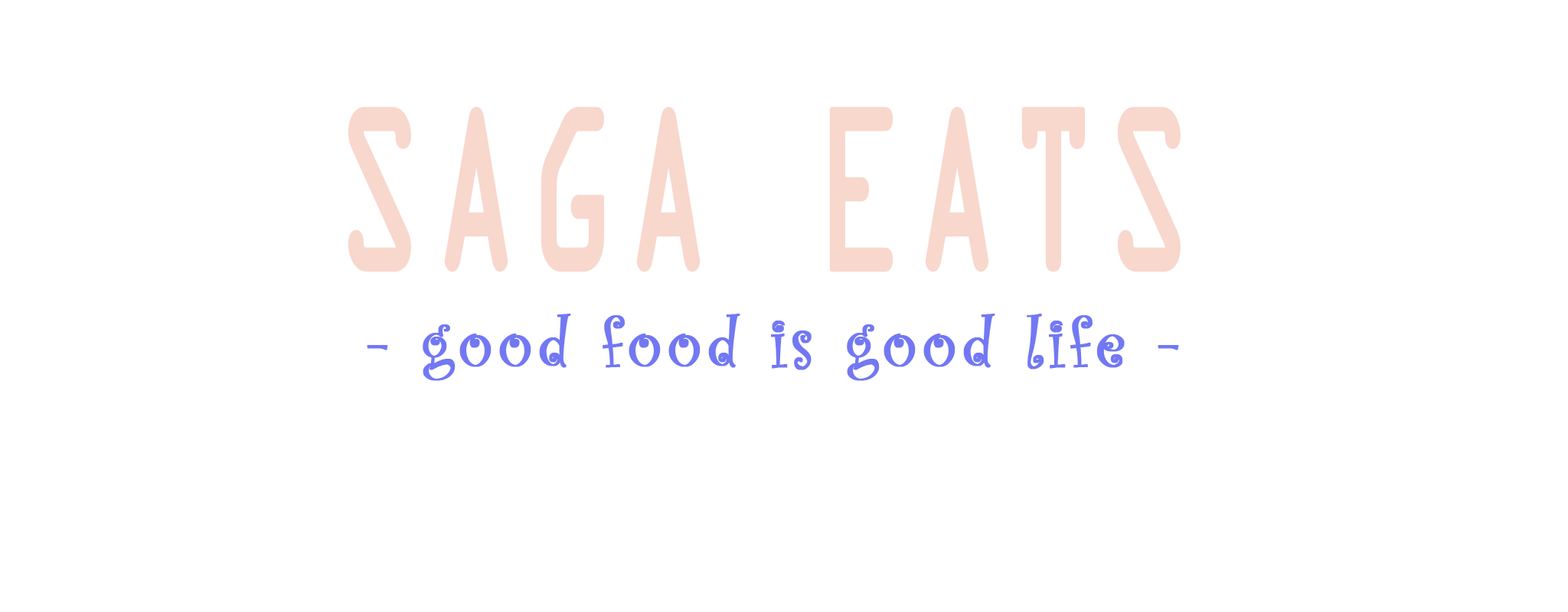
<style>
.page{position:relative;width:1568px;height:612px;background:#ffffff}
.page>*{position:absolute;margin:0}
.t1{font:207.9px "OCRAStd";letter-spacing:0.049em;color:#f8d7cd;font-weight:bold;scale:0.58 1}
.t2{font:71.5px "CurlzMT";letter-spacing:0.049em;color:#7278f2;font-weight:bold}
</style>
<div class="page">
<p class="t1" style="left:348px;top:106px;width:833px;height:167px">SAGA EATS</p>
<p class="t2" style="left:367px;top:314px;width:812px;height:67px">- good food is good life -</p>
</div>
